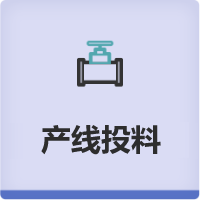
<style>
.page{position:relative;width:200px;height:200px;background:#dadcf4}
.page>*{position:absolute;margin:0}
.t1{font:30px "MicrosoftYaHei-Bold";color:#2d2d2d}
</style>
<div class="page">
<p class="t1" style="left:41px;top:125px;width:120px;height:30px">产线投料</p>
</div>
